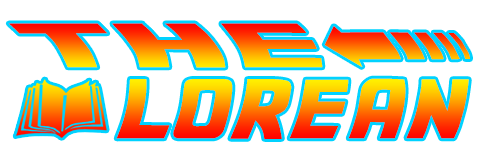
<style>
.page{position:relative;width:480px;height:160px;background:#ffffff}
.page>*{position:absolute;margin:0}
.t1{font:49.3px "Backtothefuture2002-Regular";letter-spacing:0.01em;scale:2.43 1}
.t2{font:75.4px "Backtothefuture2002-Regular";letter-spacing:0.01em;scale:1.68 1}
.t3{font:66.5px "Backtothefuture2002-Regular";letter-spacing:0.01em}
</style>
<div class="page">
<p class="t1" style="left:8px;top:23px;width:315px;height:45px">THE</p>
<p class="t2" style="left:324px;top:26px;width:146px;height:41px">&lt;</p>
<p class="t3" style="left:116px;top:78px;width:353px;height:61px">lorean</p>
</div>
